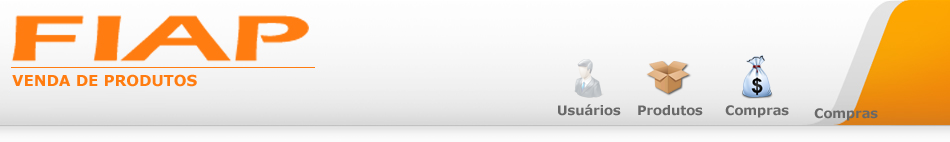
<style>
.page{position:relative;width:950px;height:142px}
.page>*{position:absolute;margin:0}
.t1{font:13px "Verdana-Bold";color:#686868}
</style>
<div class="page">
<p class="t1" style="left:558px;top:104px;width:63px;height:12px">Usuários</p>
<p class="t1" style="left:638px;top:105px;width:65px;height:11px">Produtos</p>
<p class="t1" style="left:725px;top:105px;width:64px;height:13px">Compras</p>
<p class="t1" style="left:814px;top:108px;width:64px;height:13px">Compras</p>
</div>
